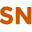
<style>
.page{position:relative;width:32px;height:32px;background:#ffffff}
.page>*{position:absolute;margin:0}
.t1{font:24.4px "Montserrat-Bold";color:#cc5500;scale:0.96 1}
</style>
<div class="page">
<p class="t1" style="left:0px;top:6px;width:32px;height:19px">SN</p>
</div>
